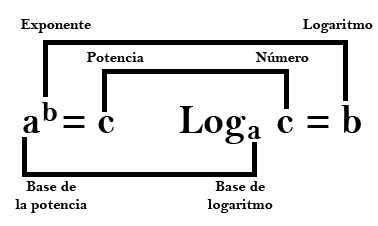
<style>
.page{position:relative;width:378px;height:226px;background:#ffffff}
.page>*{position:absolute;margin:0}
.t1{font:15px "BellMTBold";color:#000000}
.t2{font:30px "BellMTBold";color:#000000}
.t3{font:41.9px "BellMTBold";color:#000000;scale:0.92 1}
</style>
<div class="page">
<p class="t1" style="left:21px;top:19px;width:70px;height:14px">Exponente</p>
<p class="t1" style="left:303px;top:19px;width:70px;height:14px">Logaritmo</p>
<p class="t1" style="left:87px;top:52px;width:57px;height:10px">Potencia</p>
<p class="t1" style="left:255px;top:52px;width:54px;height:10px">Número</p>
<p class="t2" style="left:42px;top:102px;width:15px;height:19px">b</p>
<p class="t3" style="left:179px;top:105px;width:182px;height:39px">Log   c = b</p>
<p class="t3" style="left:23px;top:116px;width:91px;height:17px">a  = c</p>
<p class="t2" style="left:248px;top:126px;width:13px;height:13px">a</p>
<p class="t1" style="left:15px;top:181px;width:72px;height:32px;text-align:center">Base de<br>la potencia</p>
<p class="t1" style="left:207px;top:181px;width:66px;height:32px;text-align:center">Base de<br>logaritmo</p>
</div>
